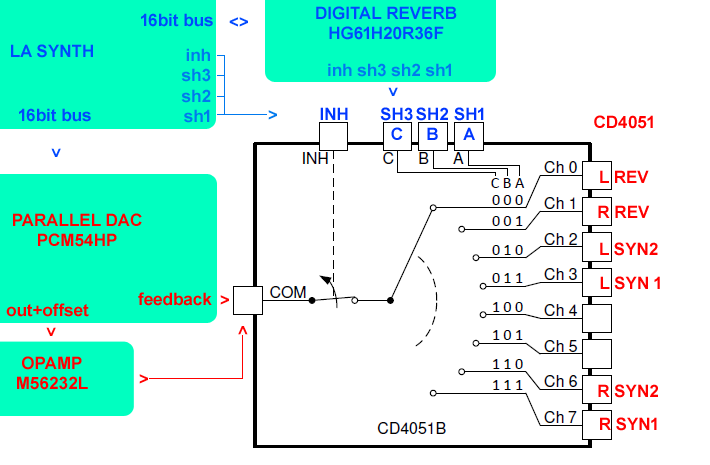
<style>
.page{position:relative;width:710px;height:465px;background:#ffffff}
.page>*{position:absolute;margin:0}
.t1{font:17px "Arial-BoldMT";color:#0048ff}
.t2{font:17px "Arial-BoldMT";color:#0079ee}
.t3{font:17px "Arial-BoldMT";color:#0036ff}
.t4{font:17px "Arial-BoldMT";color:#ff0000}
</style>
<div class="page">
<p class="t1" style="left:316px;top:6px;width:141px;height:34px;text-align:center">DIGITAL REVERB<br>HG61H20R36F</p>
<p class="t1" style="left:141px;top:13px;width:72px;height:14px">16bit bus</p>
<p class="t1" style="left:229px;top:17px;width:19px;height:10px">&lt;&gt;</p>
<p class="t1" style="left:11px;top:44px;width:82px;height:14px">LA SYNTH</p>
<p class="t2" style="left:181px;top:48px;width:30px;height:75px;text-align:right">inh<br>sh3<br>sh2<br> sh1</p>
<p class="t2" style="left:328px;top:63px;width:123px;height:14px">inh sh3 sh2 sh1</p>
<p class="t1" style="left:388px;top:87px;width:10px;height:9px;rotate:90deg">&gt;</p>
<p class="t1" style="left:19px;top:108px;width:72px;height:14px">16bit bus</p>
<p class="t2" style="left:268px;top:110px;width:9px;height:10px">&gt;</p>
<p class="t3" style="left:320px;top:107px;width:28px;height:13px">INH</p>
<p class="t3" style="left:380px;top:107px;width:33px;height:33px;text-align:center">SH3<br>C</p>
<p class="t3" style="left:416px;top:107px;width:32px;height:33px;text-align:center">SH2<br>B</p>
<p class="t3" style="left:454px;top:107px;width:30px;height:33px;text-align:center">SH1<br>A</p>
<p class="t4" style="left:594px;top:115px;width:59px;height:14px">CD4051</p>
<p class="t1" style="left:51px;top:148px;width:10px;height:9px;rotate:90deg">&gt;</p>
<p class="t4" style="left:600px;top:170px;width:49px;height:13px">L REV</p>
<p class="t4" style="left:598px;top:205px;width:52px;height:13px">R REV</p>
<p class="t4" style="left:13px;top:213px;width:129px;height:34px;text-align:center">PARALLEL DAC <br>PCM54HP</p>
<p class="t4" style="left:600px;top:242px;width:58px;height:14px">L SYN2</p>
<p class="t4" style="left:600px;top:276px;width:60px;height:14px">L SYN 1</p>
<p class="t4" style="left:138px;top:292px;width:74px;height:14px">feedback</p>
<p class="t4" style="left:6px;top:303px;width:83px;height:14px">out+offset</p>
<p class="t4" style="left:220px;top:295px;width:9px;height:10px">&gt;</p>
<p class="t4" style="left:46px;top:327px;width:10px;height:9px;rotate:90deg">&gt;</p>
<p class="t4" style="left:238px;top:326px;width:10px;height:9px;rotate:-90deg">&gt;</p>
<p class="t4" style="left:17px;top:356px;width:71px;height:34px;text-align:center">OPAMP<br>M56232L</p>
<p class="t4" style="left:139px;top:374px;width:9px;height:10px">&gt;</p>
<p class="t4" style="left:598px;top:384px;width:60px;height:14px">R SYN2</p>
<p class="t4" style="left:600px;top:417px;width:57px;height:14px">R SYN1</p>
</div>
